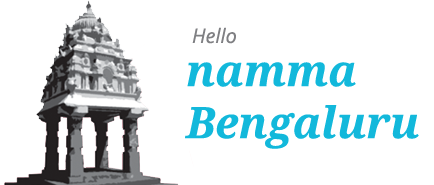
<style>
.page{position:relative;width:434px;height:185px;background:#ffffff}
.page>*{position:absolute;margin:0}
.t1{font:20px "OpenSans-Italic";color:#7f8083}
.t2{font:43.4px "DroidSerif-BoldItalic";color:#12b8db}
</style>
<div class="page">
<p class="t1" style="left:192px;top:27px;width:44px;height:17px">Hello</p>
<p class="t2" style="left:185px;top:62px;width:234px;height:87px">namma<br>Bengaluru</p>
</div>
